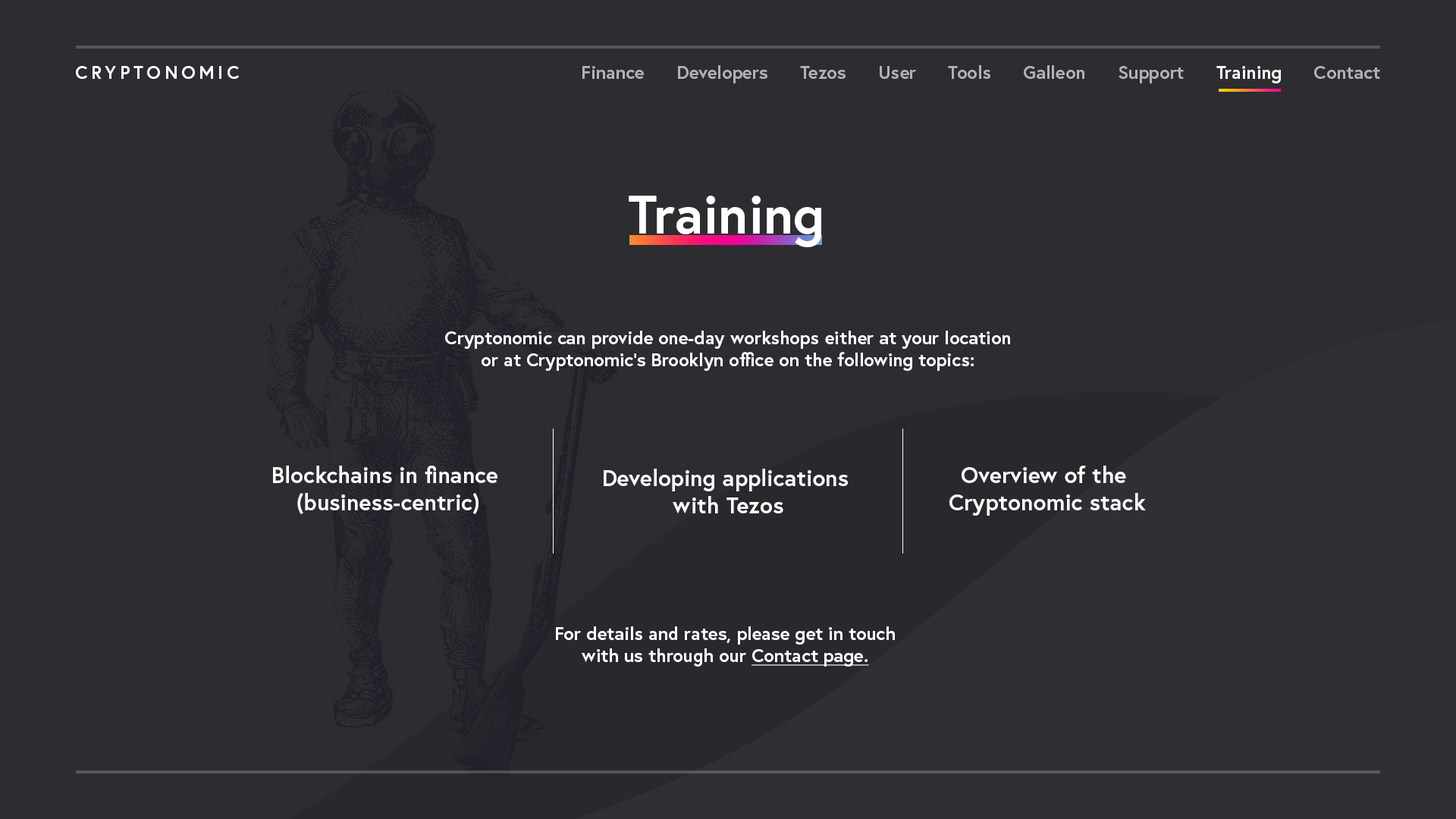
<style>
.page{position:relative;width:1456px;height:819px;background:#2d2c31}
.page>*{position:absolute;margin:0}
.t1{font:18.2px "Europa-Bold";letter-spacing:0.2em;color:#ffffff;text-transform:uppercase}
.t2{font:18.2px "Europa-Bold";color:#b2b2b2}
.t3{font:18.2px "Europa-Bold";color:#ffffff}
.t4{font:54.6px "Europa-Bold";color:#ffffff}
.t5{font:22.7px "Europa-Bold";color:#ffffff}
.t6{font:18.2px "Europa-Bold";color:#ffffff;text-decoration:underline}
</style>
<div class="page">
<p class="t1" style="left:76px;top:66px;width:163px;height:13px">CryptoNOMIC</p>
<p class="t2" style="left:582px;top:65px;width:798px;height:18px">Finance      Developers      Tezos      User      Tools      Galleon      Support      <span class="t3">Training</span>      Contact</p>
<p class="t4" style="left:629px;top:196px;width:192px;height:51px">Training</p>
<p class="t3" style="left:445px;top:331px;width:565px;height:40px;text-align:center">Cryptonomic can provide one-day workshops either at your location or at Cryptonomic’s Brooklyn office on the following topics:</p>
<p class="t5" style="left:273px;top:466px;width:224px;height:48px;text-align:center">Blockchains in finance <br>(business-centric)</p>
<p class="t5" style="left:604px;top:469px;width:244px;height:44px;text-align:center">Developing applications <br>with Tezos</p>
<p class="t5" style="left:949px;top:466px;width:197px;height:50px;text-align:center">Overview of the <br>Cryptonomic stack</p>
<p class="t3" style="left:556px;top:626px;width:339px;height:41px;text-align:center">For details and rates, please get in touch <br>with us through our <span class="t6">Contact page.</span></p>
</div>
